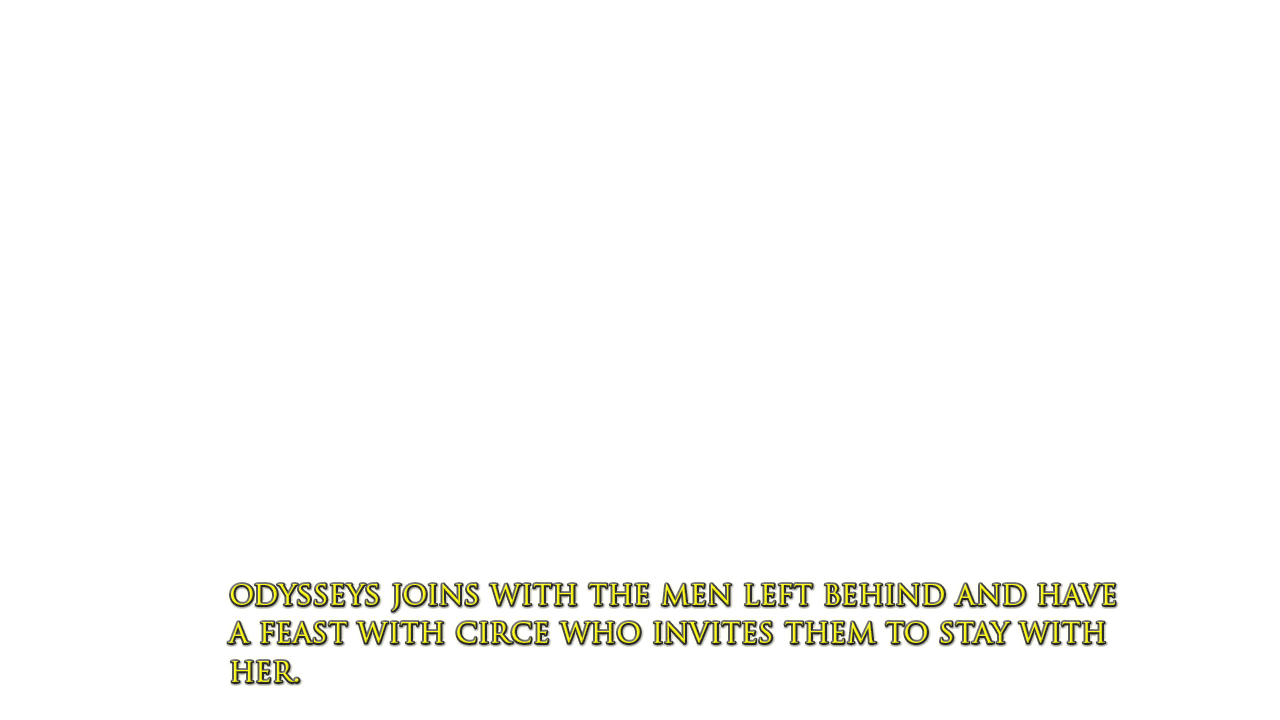
<style>
.page{position:relative;width:1280px;height:720px;background:#ffffff}
.page>*{position:absolute;margin:0}
.t1{font:31.8px "TrajanPro-Regular";color:#fffc14}
</style>
<div class="page">
<p class="t1" style="left:228px;top:583px;width:887px;height:99px">odysseys joins with the men left behind and have<br>a feast with circe who invites them to stay with<br>her.</p>
</div>
